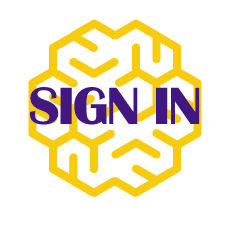
<style>
.page{position:relative;width:229px;height:229px;background:#ffffff}
.page>*{position:absolute;margin:0}
.t1{font:54px "BritannicBold";letter-spacing:-0.04em;color:#431781;scale:1.05 1}
</style>
<div class="page">
<p class="t1" style="left:30px;top:87px;width:170px;height:38px">SIGN IN</p>
</div>
